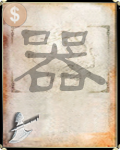
<style>
.page{position:relative;width:120px;height:150px}
.page>*{position:absolute;margin:0}
.t1{font:100px "FZGLJW--GB1-0";color:#9a9286}
</style>
<div class="page">
<p class="t1" style="left:14px;top:29px;width:92px;height:64px">器</p>
</div>
